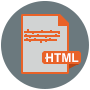
<style>
.page{position:relative;width:90px;height:90px;background:#6b797e}
.page>*{position:absolute;margin:0}
.t1{font:12px "Arial-BoldMT";color:#ffffff}
</style>
<div class="page">
<p class="t1" style="left:46px;top:53px;width:33px;height:9px">HTML</p>
</div>
